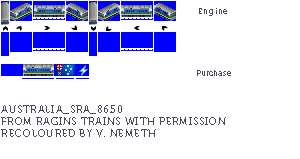
<style>
.page{position:relative;width:300px;height:159px;background:#ffffff}
.page>*{position:absolute;margin:0}
.t1{font:8px "Museo700-Regular";letter-spacing:0.075em;color:#444c5c}
.t2{font:8px "Museo700-Regular";color:#444c5c}
.t3{font:10px "Museo700-Regular";letter-spacing:0.075em;color:#444c5c;text-transform:uppercase}
</style>
<div class="page">
<p class="t1" style="left:199px;top:8px;width:28px;height:8px">Engine</p>
<p class="t2" style="left:197px;top:70px;width:34px;height:6px">Purchase</p>
<p class="t3" style="left:1px;top:105px;width:225px;height:32px">Australia_SRA_8650<br>From ragins trains with permission<br>RECOLOURED BY v. nemeth</p>
</div>
